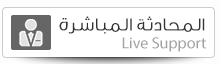
<style>
.page{position:relative;width:220px;height:65px;background:#ffffff}
.page>*{position:absolute;margin:0}
.t1{font:18px "GESSUniqueLight-Light";color:#333333;font-weight:bold}
.t2{font:16px "MyriadPro-Regular";color:#a0a0a0}
</style>
<div class="page">
<p class="t1" style="left:59px;top:16px;width:146px;height:18px">المحادثة المباشرة</p>
<p class="t2" style="left:122px;top:37px;width:84px;height:15px">Live Support</p>
</div>
